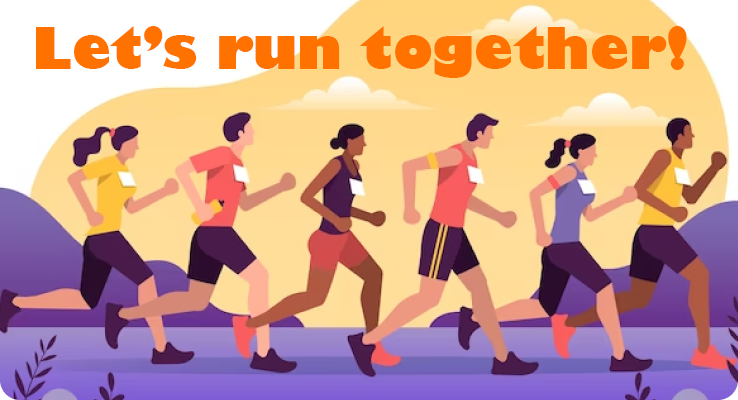
<style>
.page{position:relative;width:738px;height:400px}
.page>*{position:absolute;margin:0}
.t1{font:56px "GillSans-UltraBold";color:#ff7200}
</style>
<div class="page">
<p class="t1" style="left:36px;top:26px;width:651px;height:52px">Let’s run together!</p>
</div>
